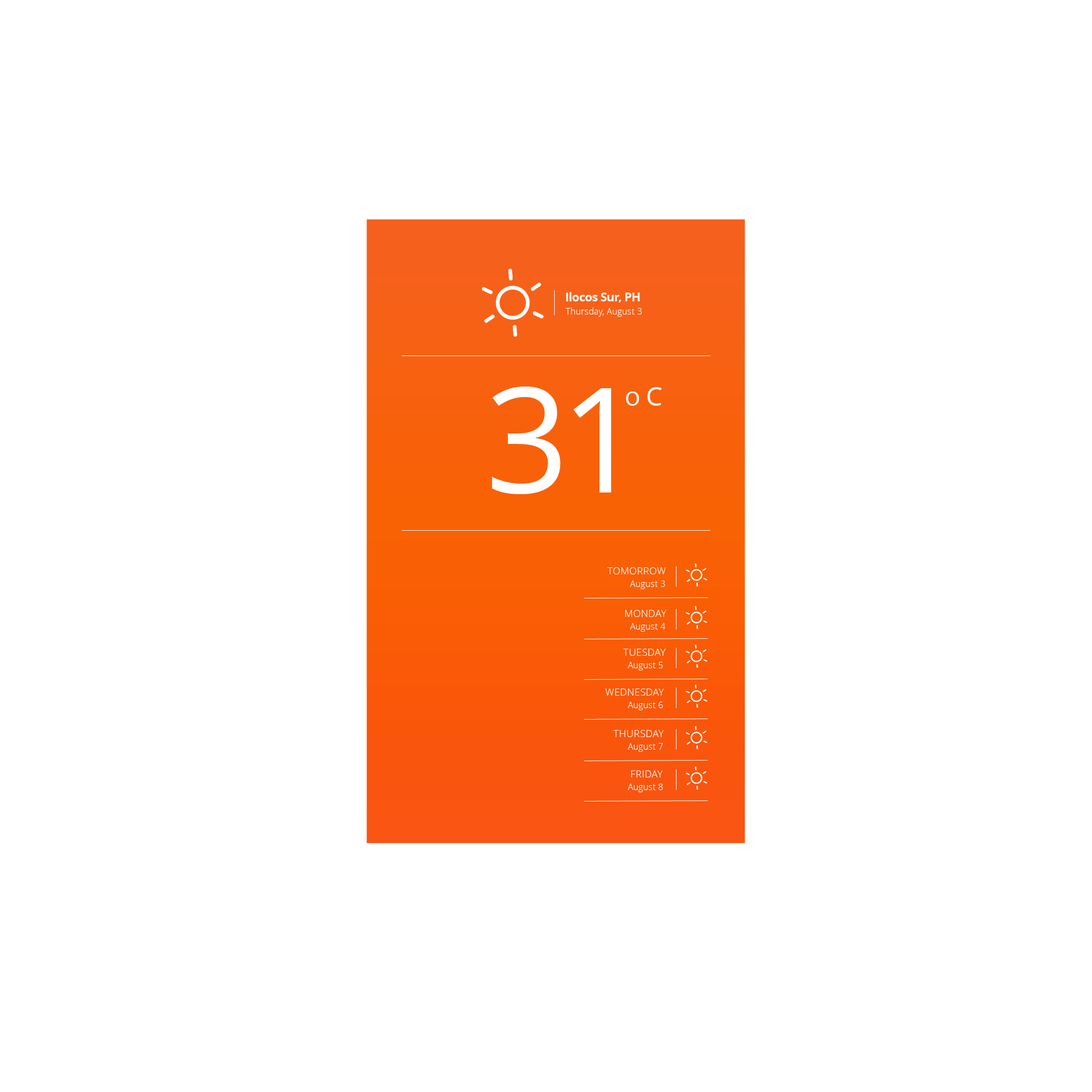
<style>
.page{position:relative;width:1092px;height:1092px;background:#ffffff}
.page>*{position:absolute;margin:0}
.t1{font:12px "OpenSans-Bold";letter-spacing:-0.025em;color:#ffffff}
.t2{font:8.7px "OpenSans-Light";letter-spacing:0.015em;color:#ffffff}
.t3{font:145.5px "OpenSans";letter-spacing:-0.025em;color:#ffffff}
.t4{font:26.2px "OpenSans";letter-spacing:-0.025em;color:#ffffff}
.t5{font:9.8px "OpenSans-Light";letter-spacing:0.035em;color:#ffffff;text-transform:uppercase}
</style>
<div class="page">
<p class="t1" style="left:566px;top:292px;width:74px;height:10px">Ilocos Sur, PH</p>
<p class="t2" style="left:566px;top:307px;width:76px;height:10px">Thursday, August 3</p>
<p class="t3" style="left:492px;top:387px;width:120px;height:107px">31</p>
<p class="t4" style="left:626px;top:387px;width:36px;height:19px">o C</p>
<p class="t5" style="left:607px;top:567px;width:59px;height:7px">Tomorrow</p>
<p class="t2" style="left:630px;top:580px;width:35px;height:9px">August 3</p>
<p class="t5" style="left:625px;top:610px;width:42px;height:7px">MONDAY</p>
<p class="t2" style="left:630px;top:623px;width:36px;height:9px">August 4</p>
<p class="t5" style="left:623px;top:649px;width:43px;height:7px">TUESDAY</p>
<p class="t2" style="left:628px;top:662px;width:35px;height:8px">August 5</p>
<p class="t5" style="left:605px;top:688px;width:59px;height:8px">WEDNESDAY</p>
<p class="t2" style="left:628px;top:702px;width:35px;height:8px">August 6</p>
<p class="t5" style="left:613px;top:730px;width:51px;height:7px">THURSDAY</p>
<p class="t2" style="left:628px;top:743px;width:35px;height:9px">August 7</p>
<p class="t5" style="left:631px;top:770px;width:32px;height:7px">FRIDAY</p>
<p class="t2" style="left:628px;top:783px;width:35px;height:9px">August 8</p>
</div>
